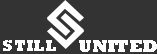
<style>
.page{position:relative;width:157px;height:54px;background:#333333}
.page>*{position:absolute;margin:0}
.t1{font:16.4px "Rockwell-ExtraBold";color:#ffffff;text-transform:uppercase}
.t2{font:18px "Rockwell-ExtraBold";color:#ffffff;text-transform:uppercase}
</style>
<div class="page">
<p class="t1" style="left:3px;top:40px;width:53px;height:11px">Still</p>
<p class="t2" style="left:79px;top:40px;width:78px;height:12px">United</p>
</div>
